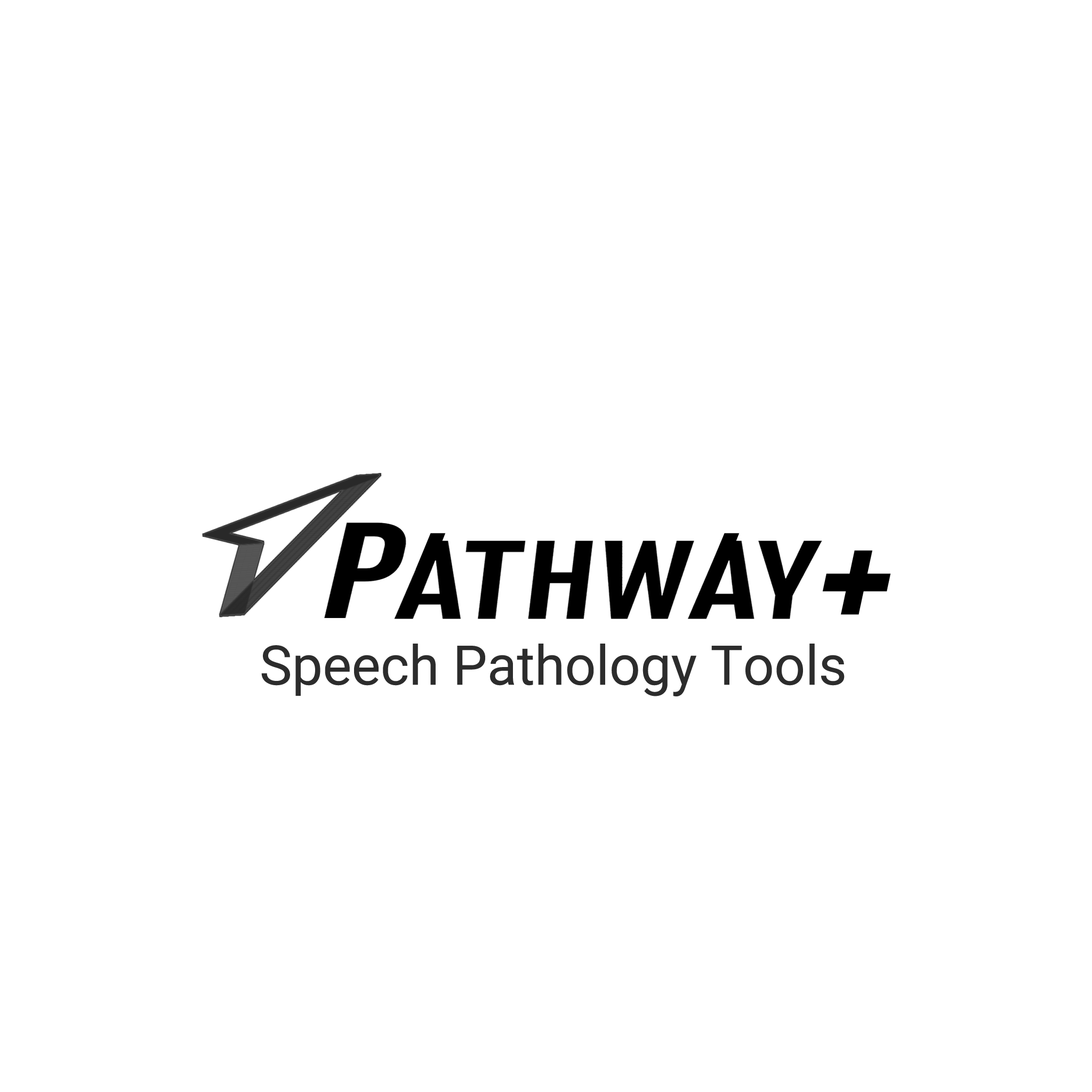
<style>
.page{position:relative;width:1092px;height:1092px;background:#ffffff}
.page>*{position:absolute;margin:0}
.t1{font:54.6px "Roboto-Regular";color:#2c2c2c}
</style>
<div class="page">
<p class="t1" style="left:261px;top:644px;width:584px;height:52px">Speech Pathology Tools</p>
</div>
